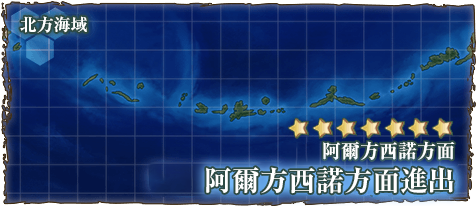
<style>
.page{position:relative;width:476px;height:206px}
.page>*{position:absolute;margin:0}
.t1{font:17px "RyuminPr6N-ExBold";color:#ffffff}
.t2{font:19px "RyuminPro-ExBold";color:#ffffff}
.t3{font:28px "RyuminPro-ExBold";color:#ffffff}
</style>
<div class="page">
<p class="t1" style="left:20px;top:16px;width:67px;height:17px">北方海域</p>
<p class="t2" style="left:323px;top:141px;width:132px;height:19px">阿爾方西諾方面</p>
<p class="t3" style="left:206px;top:167px;width:248px;height:27px">阿爾方西諾方面進出</p>
</div>
